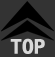
<style>
.page{position:relative;width:55px;height:57px;background:#333333}
.page>*{position:absolute;margin:0}
.t1{font:20px "DejaVuSansMono-Bold";letter-spacing:-0.05em;color:#d8d8d8;font-weight:bold}
</style>
<div class="page">
<p class="t1" style="left:10px;top:38px;width:35px;height:16px">TOP</p>
</div>
